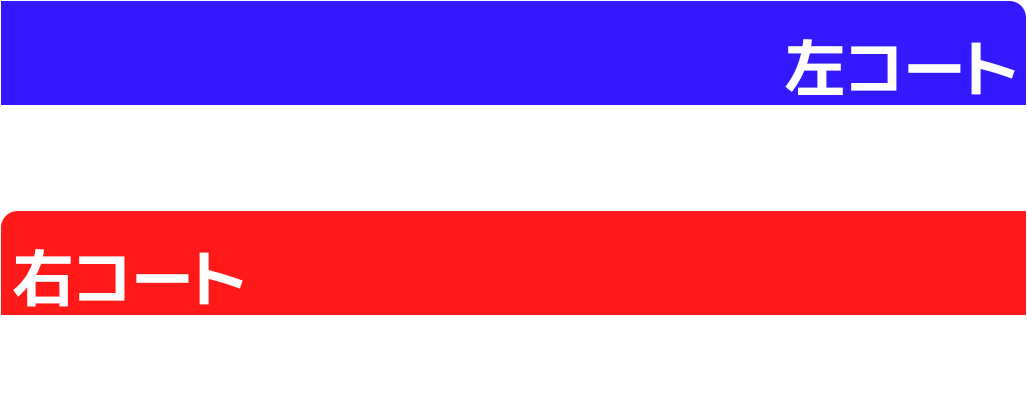
<style>
.page{position:relative;width:1027px;height:420px;background:#ffffff}
.page>*{position:absolute;margin:0}
.t1{font:62.6px "Kazesawa-Bold";color:#ffffff}
</style>
<div class="page">
<p class="t1" style="left:785px;top:39px;width:230px;height:56px">左コート</p>
<p class="t1" style="left:13px;top:249px;width:230px;height:58px">右コート</p>
</div>
